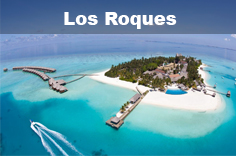
<style>
.page{position:relative;width:236px;height:156px}
.page>*{position:absolute;margin:0}
.t1{font:18px "Arial-Black";color:#ffffff}
</style>
<div class="page">
<p class="t1" style="left:64px;top:12px;width:113px;height:17px">Los Roques</p>
</div>
